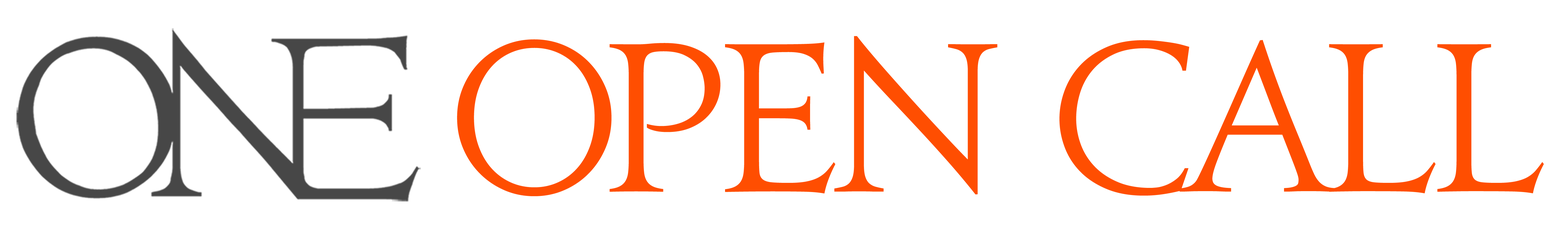
<style>
.page{position:relative;width:1568px;height:235px;background:#ffffff}
.page>*{position:absolute;margin:0}
.t1{font:191.3px "Jupiter";letter-spacing:-0.05em;color:#ff4e01;font-variant:small-caps}
.t2{font:191.3px "Jupiter";letter-spacing:-0.1em;color:#ff4e01;font-variant:small-caps}
</style>
<div class="page">
<p class="t1" style="left:457px;top:36px;width:1087px;height:160px"><span class="t2">O</span>PEN CALL</p>
</div>
